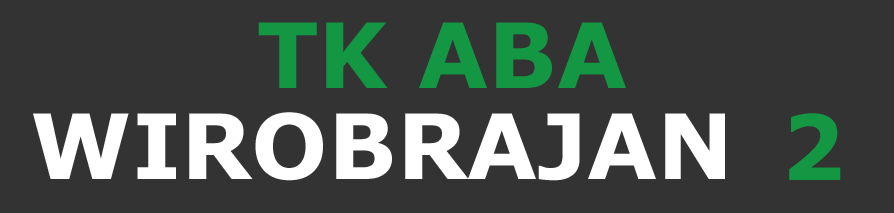
<style>
.page{position:relative;width:894px;height:213px;background:#333333}
.page>*{position:absolute;margin:0}
.t1{font:90.1px "Verdana-Bold";color:#139743}
.t2{font:90.1px "Verdana-Bold";color:#ffffff}
</style>
<div class="page">
<p class="t1" style="left:258px;top:22px;width:368px;height:66px">TK ABA</p>
<p class="t2" style="left:33px;top:112px;width:692px;height:69px">WIROBRAJAN</p>
<p class="t1" style="left:789px;top:113px;width:52px;height:67px">2</p>
</div>
